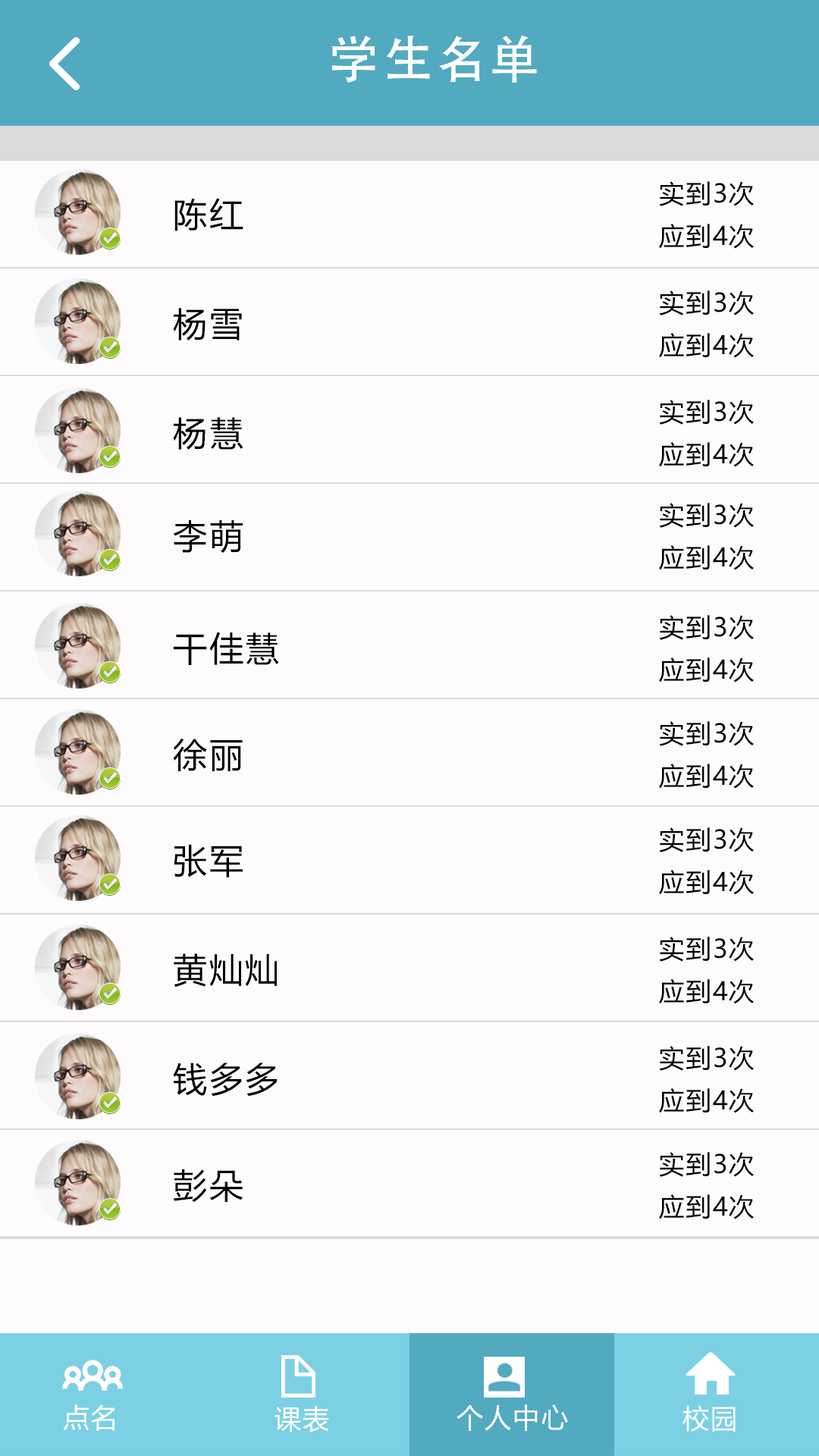
<style>
.page{position:relative;width:819px;height:1456px;background:#fdfbfb}
.page>*{position:absolute;margin:0}
.t1{font:50.8px "AdobeHeitiStd-Regular";letter-spacing:0.06em;color:#ffffff}
.t2{font:25.2px "MicrosoftYaHei";letter-spacing:0.06em;color:#000000}
.t3{font:34.1px "MicrosoftYaHei";letter-spacing:0.06em;color:#000000}
.t4{font:26.9px "MicrosoftYaHei";letter-spacing:0.06em;color:#ffffff}
</style>
<div class="page">
<p class="t1" style="left:332px;top:35px;width:205px;height:48px">学生名单</p>
<p class="t2" style="left:659px;top:181px;width:95px;height:25px">实到3次</p>
<p class="t3" style="left:174px;top:198px;width:69px;height:33px">陈红</p>
<p class="t2" style="left:659px;top:224px;width:95px;height:25px">应到4次</p>
<p class="t2" style="left:659px;top:290px;width:95px;height:25px">实到3次</p>
<p class="t3" style="left:173px;top:308px;width:69px;height:32px">杨雪</p>
<p class="t2" style="left:659px;top:333px;width:95px;height:25px">应到4次</p>
<p class="t2" style="left:659px;top:400px;width:95px;height:25px">实到3次</p>
<p class="t3" style="left:173px;top:417px;width:70px;height:33px">杨慧</p>
<p class="t2" style="left:659px;top:442px;width:95px;height:25px">应到4次</p>
<p class="t2" style="left:659px;top:503px;width:95px;height:25px">实到3次</p>
<p class="t3" style="left:173px;top:519px;width:70px;height:35px">李萌</p>
<p class="t2" style="left:659px;top:545px;width:95px;height:25px">应到4次</p>
<p class="t2" style="left:659px;top:615px;width:95px;height:25px">实到3次</p>
<p class="t3" style="left:173px;top:632px;width:106px;height:33px">干佳慧</p>
<p class="t2" style="left:659px;top:657px;width:95px;height:25px">应到4次</p>
<p class="t2" style="left:659px;top:721px;width:95px;height:25px">实到3次</p>
<p class="t3" style="left:173px;top:738px;width:70px;height:33px">徐丽</p>
<p class="t2" style="left:659px;top:764px;width:95px;height:25px">应到4次</p>
<p class="t2" style="left:659px;top:827px;width:95px;height:25px">实到3次</p>
<p class="t3" style="left:174px;top:844px;width:69px;height:33px">张军</p>
<p class="t2" style="left:659px;top:870px;width:95px;height:25px">应到4次</p>
<p class="t2" style="left:659px;top:937px;width:95px;height:25px">实到3次</p>
<p class="t3" style="left:174px;top:953px;width:103px;height:34px">黄灿灿</p>
<p class="t2" style="left:659px;top:979px;width:95px;height:25px">应到4次</p>
<p class="t2" style="left:659px;top:1046px;width:95px;height:25px">实到3次</p>
<p class="t3" style="left:173px;top:1062px;width:105px;height:35px">钱多多</p>
<p class="t2" style="left:659px;top:1088px;width:95px;height:25px">应到4次</p>
<p class="t2" style="left:659px;top:1152px;width:95px;height:25px">实到3次</p>
<p class="t3" style="left:173px;top:1169px;width:70px;height:34px">彭朵</p>
<p class="t2" style="left:659px;top:1194px;width:95px;height:25px">应到4次</p>
<p class="t4" style="left:63px;top:1404px;width:52px;height:27px">点名</p>
<p class="t4" style="left:275px;top:1406px;width:54px;height:26px">课表</p>
<p class="t4" style="left:457px;top:1404px;width:111px;height:27px">个人中心</p>
<p class="t4" style="left:682px;top:1405px;width:54px;height:27px">校园</p>
</div>
